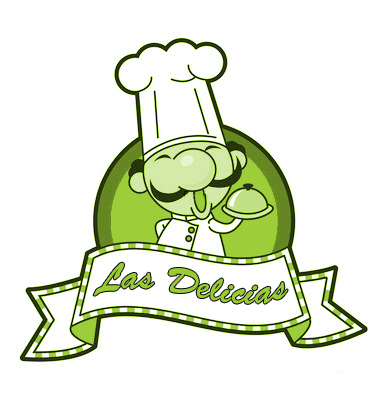
<style>
.page{position:relative;width:387px;height:400px;background:#ffffff}
.page>*{position:absolute;margin:0}
.t1{font:37.5px "BrushScriptStd";color:#99cc33}
</style>
<div class="page">
<p class="t1" style="left:93px;top:262px;width:195px;height:42px">Las Delicias</p>
</div>
